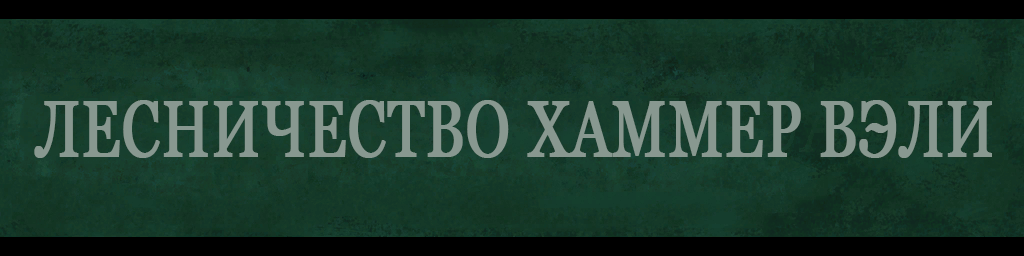
<style>
.page{position:relative;width:1024px;height:256px}
.page>*{position:absolute;margin:0}
.t1{font:80.2px "Georgia";color:#889890;font-weight:bold;scale:0.74 1}
</style>
<div class="page">
<p class="t1" style="left:34px;top:100px;width:958px;height:58px">ЛЕСНИЧЕСТВО ХАММЕР ВЭЛИ</p>
</div>
